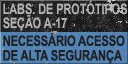
<style>
.page{position:relative;width:128px;height:64px}
.page>*{position:absolute;margin:0}
.t1{font:14.4px/14.7px "Arial-BoldMT";color:#b5b5b5;text-transform:uppercase;scale:0.75 1}
.t2{font:14.4px/14.7px "Arial-BoldMT";letter-spacing:-0.02em;color:#212121;text-transform:uppercase;scale:0.79 1}
</style>
<div class="page">
<p class="t1" style="left:3px;top:0px;width:124px;height:31px">labS. de protótipoS<br>Seção a-17</p>
<p class="t2" style="left:3px;top:32px;width:122px;height:32px">Necessário acesso<br> de alta segurança</p>
</div>
